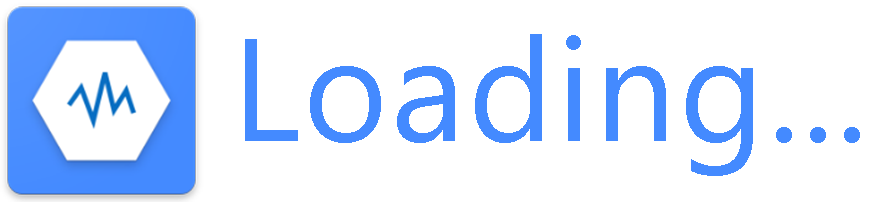
<style>
.page{position:relative;width:880px;height:202px;background:#ffffff}
.page>*{position:absolute;margin:0}
.t1{font:145px "SegoeUIHistoric";letter-spacing:0.02em;color:#448aff}
</style>
<div class="page">
<p class="t1" style="left:245px;top:34px;width:615px;height:142px">Loading...</p>
</div>
